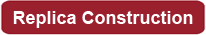
<style>
.page{position:relative;width:206px;height:35px;background:#9a202d}
.page>*{position:absolute;margin:0}
.t1{font:17.8px "Arial-BoldMT";color:#ffffff}
</style>
<div class="page">
<p class="t1" style="left:13px;top:11px;width:180px;height:17px">Replica Construction</p>
</div>
